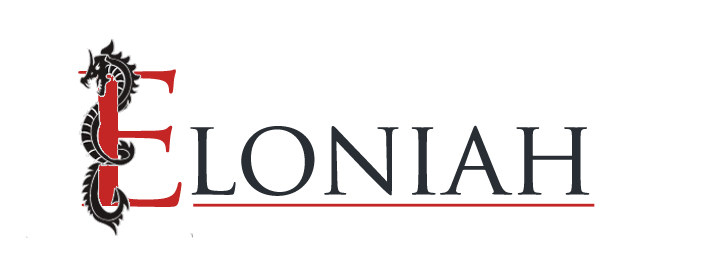
<style>
.page{position:relative;width:706px;height:260px;background:#ffffff}
.page>*{position:absolute;margin:0}
.t1{font:179.1px "TrajanPro-Regular";color:#c42626;scale:1.3 1}
.t2{font:104.5px "TrajanPro-Regular";color:#282e33}
</style>
<div class="page">
<p class="t1" style="left:78px;top:69px;width:104px;height:138px">E</p>
<p class="t2" style="left:190px;top:125px;width:400px;height:71px">loniah</p>
</div>
